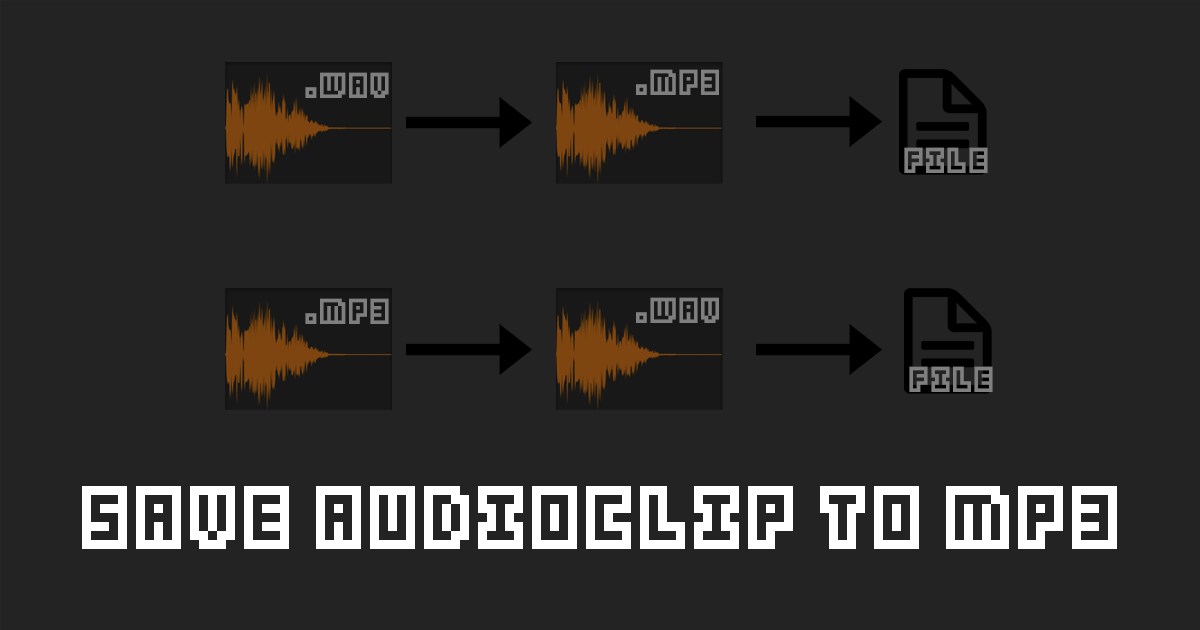
<style>
.page{position:relative;width:1200px;height:630px;background:#232323}
.page>*{position:absolute;margin:0}
.t1{font:28.9px "Kenney-Blocks";color:#7f7f7f}
.t2{font:72px "Kenney-Blocks";color:#ffffff}
</style>
<div class="page">
<p class="t1" style="left:305px;top:72px;width:84px;height:26px">.wav</p>
<p class="t1" style="left:636px;top:69px;width:83px;height:26px">.mp3</p>
<p class="t1" style="left:904px;top:147px;width:84px;height:26px">file</p>
<p class="t1" style="left:305px;top:298px;width:84px;height:26px">.mp3</p>
<p class="t1" style="left:636px;top:297px;width:83px;height:26px">.wav</p>
<p class="t1" style="left:909px;top:366px;width:84px;height:26px">file</p>
<p class="t2" style="left:82px;top:486px;width:1035px;height:63px">Save AudioClip to MP3</p>
</div>
